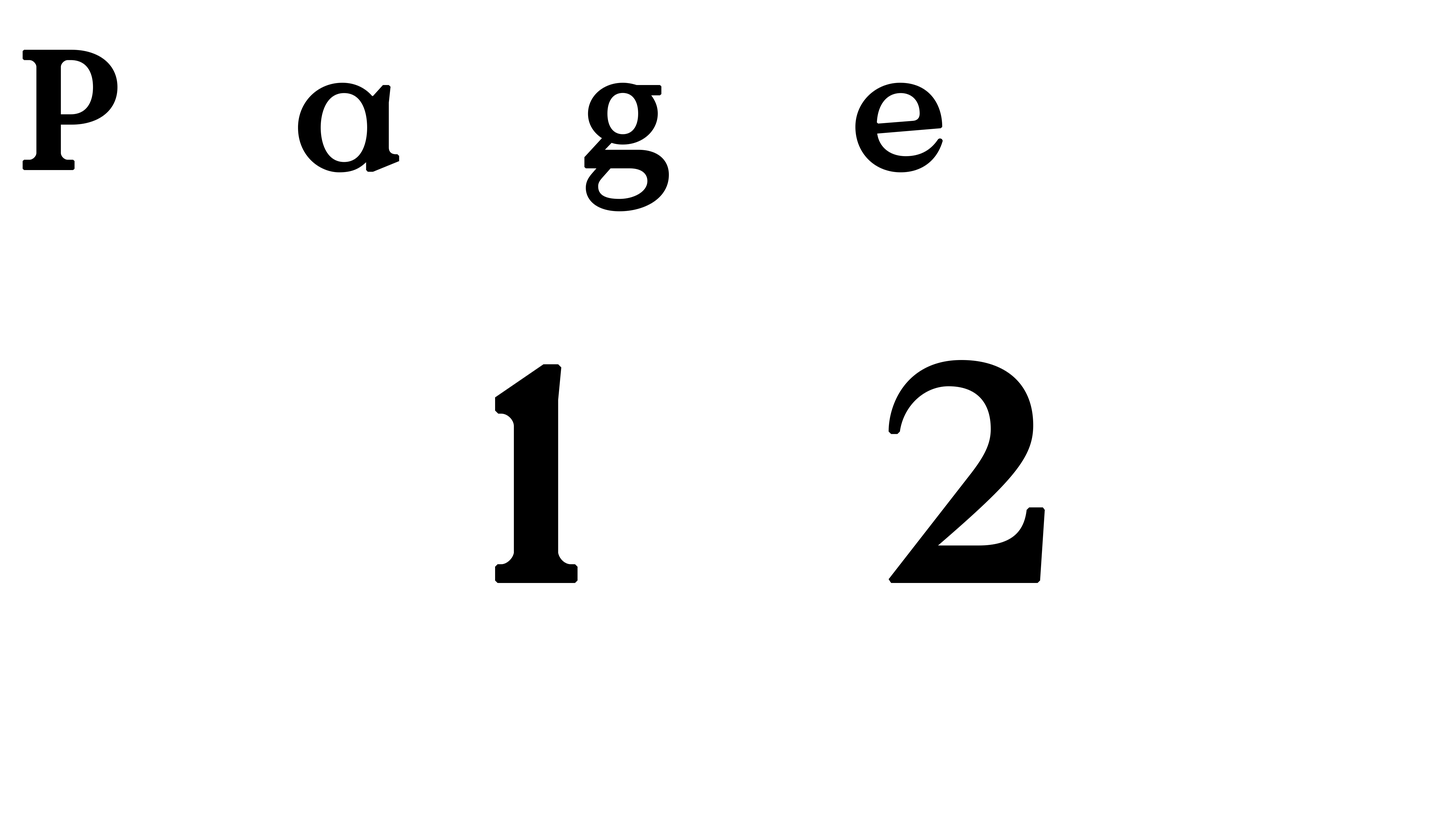
<style>
.page{position:relative;width:1456px;height:819px;background:#ffffff}
.page>*{position:absolute;margin:0}
.t1{font:172px "ValueSerif";letter-spacing:1.04em;color:#000000}
.t2{font:312.3px "ValueSerif";letter-spacing:1.04em;color:#000000}
</style>
<div class="page">
<p class="t1" style="left:22px;top:50px;width:921px;height:161px">Page</p>
<p class="t2" style="left:495px;top:364px;width:83px;height:219px">1</p>
<p class="t2" style="left:888px;top:360px;width:157px;height:223px">2</p>
</div>
